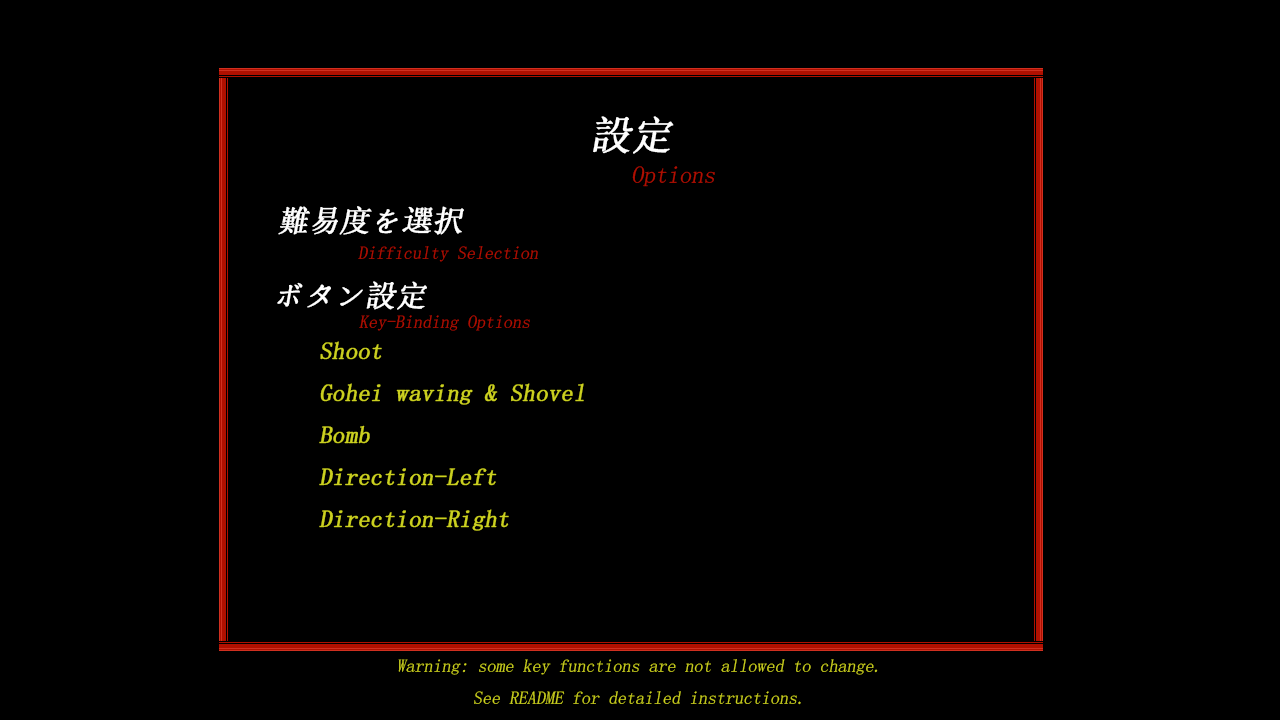
<style>
.page{position:relative;width:1280px;height:720px;background:#000000}
.page>*{position:absolute;margin:0}
.t1{font:40px "SimSun";color:#fefefe;font-weight:bold;font-style:italic}
.t2{font:24px "SimSun";color:#b01000;font-style:italic}
.t3{font:30px "SimSun";color:#fefefe;font-weight:bold;font-style:italic}
.t4{font:18px "SimSun";color:#b01000;font-style:italic}
.t5{font:24px "SimSun";color:#cbd020;font-weight:bold;font-style:italic}
.t6{font:18px "SimSun";color:#cbd020;font-style:italic}
</style>
<div class="page">
<p class="t1" style="left:593px;top:116px;width:81px;height:38px">設定</p>
<p class="t2" style="left:632px;top:166px;width:83px;height:21px">Options</p>
<p class="t3" style="left:278px;top:206px;width:186px;height:29px">難易度を選択</p>
<p class="t4" style="left:358px;top:246px;width:180px;height:16px">Difficulty Selection</p>
<p class="t3" style="left:277px;top:281px;width:150px;height:29px">ボタン設定</p>
<p class="t4" style="left:359px;top:315px;width:171px;height:16px">Key-Binding Options</p>
<p class="t5" style="left:319px;top:341px;width:265px;height:190px">Shoot<br>Gohei waving &amp; Shovel<br>Bomb<br>Direction-Left<br>Direction-Right</p>
<p class="t6" style="left:398px;top:659px;width:480px;height:46px;text-align:center">Warning: some key functions are not allowed to change. <br>See README for detailed instructions.</p>
</div>
